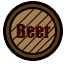
<style>
.page{position:relative;width:64px;height:64px;background:#ffffff}
.page>*{position:absolute;margin:0}
.t1{font:18px "Impact";color:#390606}
</style>
<div class="page">
<p class="t1" style="left:16px;top:24px;width:35px;height:14px">Beer</p>
</div>
